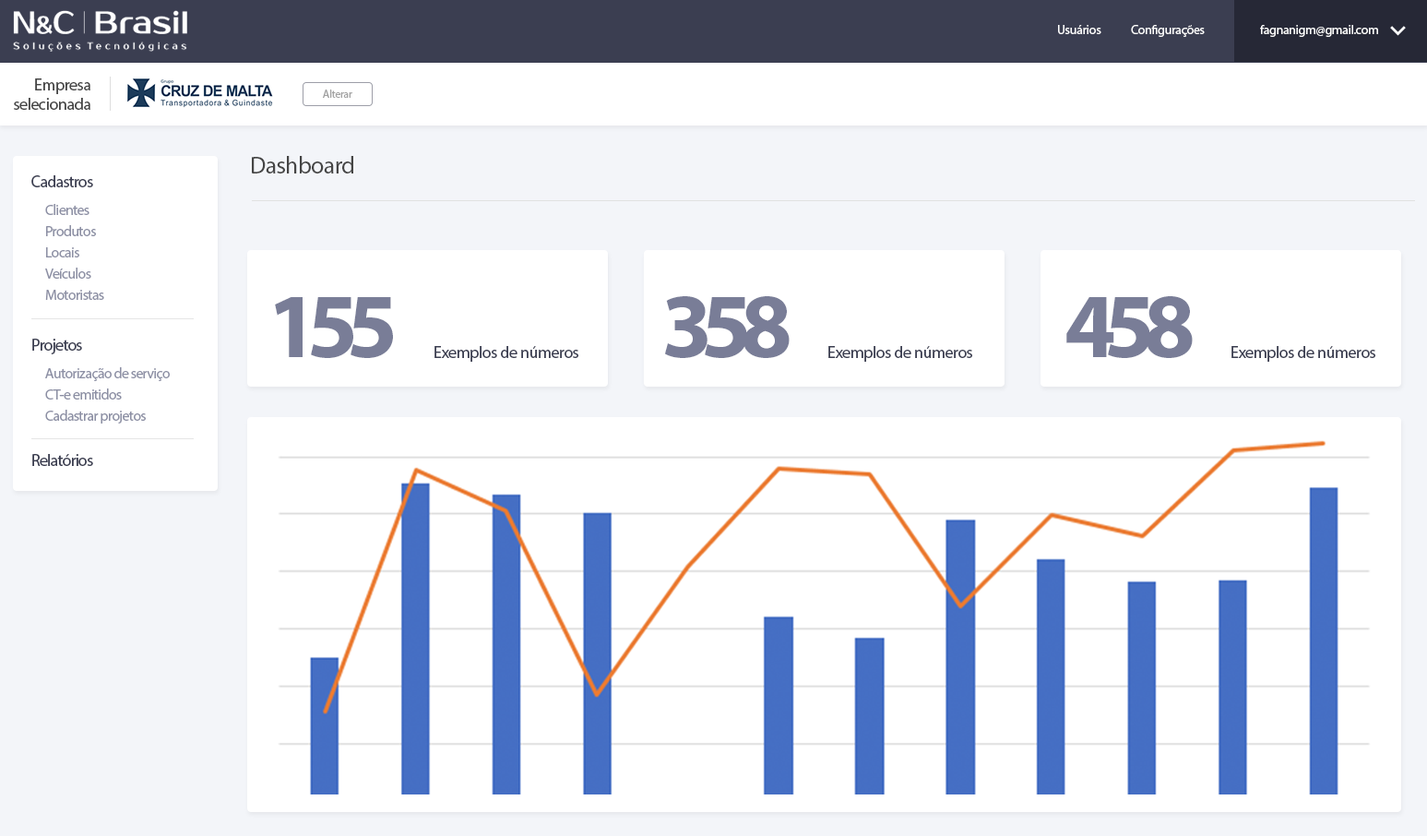
<style>
.page{position:relative;width:1427px;height:836px;background:#ffffff}
.page>*{position:absolute;margin:0}
.t1{font:12.9px "MyriadPro-Regular";letter-spacing:-0.025em;color:#ffffff}
.t2{font:16.6px/19.3px "MyriadPro-Regular";letter-spacing:-0.025em;color:#454545}
.t3{font:11.1px "MyriadPro-Regular";letter-spacing:-0.025em;color:#a2a2a2}
.t4{font:24px "MyriadPro-Regular";letter-spacing:-0.025em;color:#454545}
.t5{font:16.6px "MyriadPro-Regular";letter-spacing:-0.045em;color:#3b3e51}
.t6{font:14.8px "MyriadPro-Regular";letter-spacing:-0.045em;color:#8c8fa4}
.t7{font:92.2px "MyriadPro-Bold";letter-spacing:-0.125em;color:#797d97}
.t8{font:16.6px "MyriadPro-Regular";letter-spacing:-0.025em;color:#3b3e51}
.t9{font:14.8px "MyriadPro-Regular";letter-spacing:-0.045em;color:#8d90a5}
</style>
<div class="page">
<p class="t1" style="left:1058px;top:25px;width:43px;height:9px">Usuários</p>
<p class="t1" style="left:1131px;top:25px;width:74px;height:12px">Configurações</p>
<p class="t1" style="left:1260px;top:25px;width:118px;height:12px">fagnanigm@gmail.com</p>
<p class="t2" style="left:14px;top:78px;width:76px;height:32px;text-align:right">Empresa<br>selecionada</p>
<p class="t3" style="left:323px;top:89px;width:29px;height:9px">Alterar</p>
<p class="t4" style="left:252px;top:156px;width:101px;height:17px">Dashboard</p>
<p class="t5" style="left:31px;top:175px;width:62px;height:12px">Cadastros</p>
<p class="t6" style="left:45px;top:204px;width:44px;height:11px">Clientes</p>
<p class="t6" style="left:46px;top:225px;width:50px;height:11px">Produtos</p>
<p class="t6" style="left:46px;top:247px;width:33px;height:10px">Locais</p>
<p class="t6" style="left:45px;top:267px;width:46px;height:12px">Veículos</p>
<p class="t6" style="left:45px;top:290px;width:59px;height:10px">Motoristas</p>
<p class="t7" style="left:275px;top:297px;width:118px;height:61px">155</p>
<p class="t7" style="left:665px;top:296px;width:125px;height:62px">358</p>
<p class="t7" style="left:1066px;top:296px;width:127px;height:62px">458</p>
<p class="t5" style="left:32px;top:339px;width:50px;height:15px">Projetos</p>
<p class="t8" style="left:434px;top:346px;width:144px;height:16px">Exemplos de números</p>
<p class="t8" style="left:828px;top:346px;width:144px;height:16px">Exemplos de números</p>
<p class="t8" style="left:1231px;top:346px;width:144px;height:16px">Exemplos de números</p>
<p class="t9" style="left:45px;top:367px;width:125px;height:14px">Autorização de serviço</p>
<p class="t6" style="left:45px;top:388px;width:77px;height:11px">CT-e emitidos</p>
<p class="t6" style="left:45px;top:410px;width:101px;height:13px">Cadastrar projetos</p>
<p class="t5" style="left:32px;top:454px;width:61px;height:12px">Relatórios</p>
</div>
